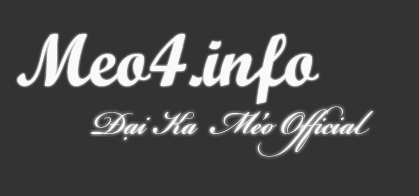
<style>
.page{position:relative;width:419px;height:196px;background:#333333}
.page>*{position:absolute;margin:0}
.t1{font:74px "ScriptMTBold";color:#fbf8f8}
.t2{font:48px "BickhamScriptPro-Regular";color:#fbf8f8}
.t3{font:72.7px "BickhamScriptPro-Regular";color:#fbf8f8}
</style>
<div class="page">
<p class="t1" style="left:17px;top:34px;width:302px;height:70px">Meo4.info</p>
<p class="t2" style="left:90px;top:106px;width:283px;height:51px">Đại Ka  Meo Official</p>
<p class="t3" style="left:263px;top:113px;width:6px;height:7px;rotate:180deg">‘</p>
<p class="t2" style="left:124px;top:137px;width:3px;height:3px">.</p>
</div>
